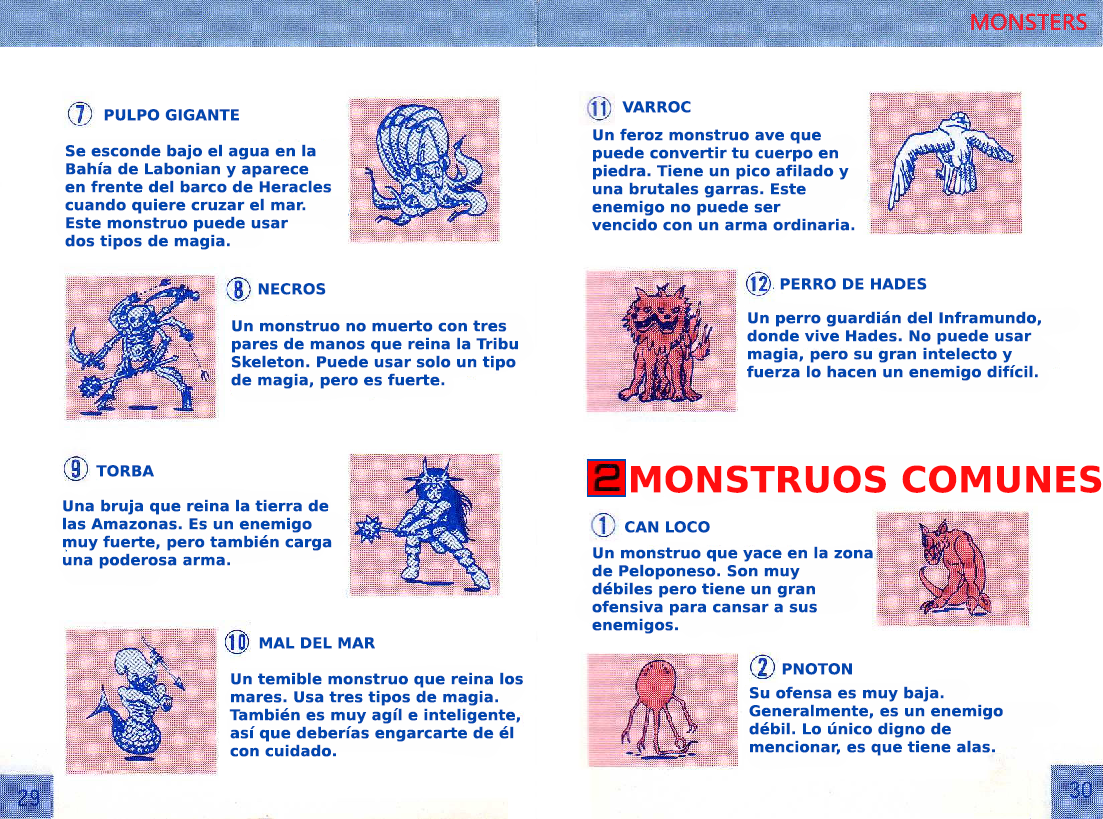
<style>
.page{position:relative;width:1103px;height:819px;background:#ffffff}
.page>*{position:absolute;margin:0}
.t1{font:15px "PrimaSansBT-Bold";color:#0247af}
.t2{font:36px "PrimaSansBT-Bold";color:#ff0e0f}
</style>
<div class="page">
<p class="t1" style="left:622px;top:101px;width:69px;height:12px">VARROC</p>
<p class="t1" style="left:104px;top:109px;width:135px;height:12px">PULPO GIGANTE</p>
<p class="t1" style="left:592px;top:128px;width:263px;height:103px">Un feroz monstruo ave que <br>puede convertir tu cuerpo en <br>piedra. Tiene un pico afilado y <br>una brutales garras. Este <br>enemigo no puede ser<br>vencido con un arma ordinaria.</p>
<p class="t1" style="left:65px;top:144px;width:267px;height:106px">Se esconde bajo el agua en la <br>Bahía de Labonian y aparece <br>en frente del barco de Heracles <br>cuando quiere cruzar el mar. <br>Este monstruo puede usar <br>dos tipos de magia.</p>
<p class="t1" style="left:780px;top:278px;width:147px;height:12px">PERRO DE HADES</p>
<p class="t1" style="left:258px;top:283px;width:68px;height:12px">NECROS</p>
<p class="t1" style="left:747px;top:311px;width:294px;height:70px">Un perro guardián del Inframundo,<br>donde vive Hades. No puede usar<br>magia, pero su gran intelecto y <br>fuerza lo hacen un enemigo difícil.</p>
<p class="t1" style="left:231px;top:320px;width:287px;height:69px">Un monstruo no muerto con tres<br>pares de manos que reina la Tribu<br>Skeleton. Puede usar solo un tipo<br>de magia, pero es fuerte.</p>
<p class="t1" style="left:96px;top:465px;width:58px;height:12px">TORBA</p>
<p class="t2" style="left:631px;top:465px;width:471px;height:28px">MONSTRUOS COMUNES</p>
<p class="t1" style="left:63px;top:499px;width:269px;height:70px">Una bruja que reina la tierra de <br>las Amazonas. Es un enemigo <br>muy fuerte, pero también carga <br>una poderosa arma.</p>
<p class="t1" style="left:625px;top:521px;width:85px;height:12px">CAN LOCO</p>
<p class="t1" style="left:592px;top:546px;width:281px;height:88px">Un monstruo que yace en la zona<br>de Peloponeso. Son muy <br>débiles pero tiene un gran <br>ofensiva para cansar a sus <br>enemigos.</p>
<p class="t1" style="left:259px;top:637px;width:116px;height:12px">MAL DEL MAR</p>
<p class="t1" style="left:782px;top:663px;width:70px;height:12px">PNOTON</p>
<p class="t1" style="left:229px;top:672px;width:294px;height:85px">Un temible monstruo que reina los<br>mares. Usa tres tipos de magia. <br>También es muy agíl e inteligente,<br>así que deberías engarcarte de él<br>con cuidado.</p>
<p class="t1" style="left:749px;top:686px;width:254px;height:70px">Su ofensa es muy baja.<br>Generalmente, es un enemigo <br>débil. Lo único digno de <br>mencionar, es que tiene alas.</p>
</div>
